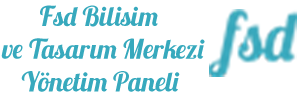
<style>
.page{position:relative;width:300px;height:100px;background:#ffffff}
.page>*{position:absolute;margin:0}
.t1{font:27.3px "Lobster1.3";color:#37a9bd}
.t2{font:30.3px "Lobster1.3";color:#37a9bd}
</style>
<div class="page">
<p class="t1" style="left:1px;top:5px;width:204px;height:87px;text-align:center"><span class="t2">    </span> Fsd Bilisim<br>       ve Tasarım Merkezi<br>      Yönetim Paneli</p>
</div>
